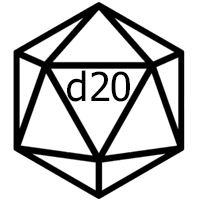
<style>
.page{position:relative;width:200px;height:200px;background:#ffffff}
.page>*{position:absolute;margin:0}
.t1{font:40px "Tahoma";color:#000000}
</style>
<div class="page">
<p class="t1" style="left:67px;top:70px;width:63px;height:32px">d20</p>
</div>
